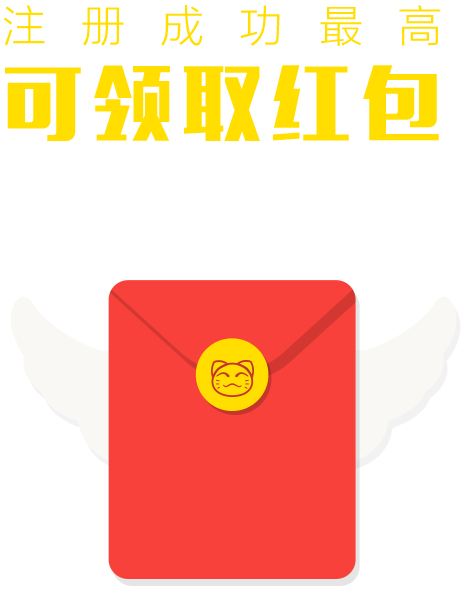
<style>
.page{position:relative;width:468px;height:590px;background:#ffffff}
.page>*{position:absolute;margin:0}
.t1{font:44px/90px "FZLTKHK--GBK1-0";letter-spacing:0.8em;color:#ffde00}
.t2{font:80px/90px "MFLiHei_Noncommercial-Regular";letter-spacing:0.12em;color:#ffde00}
</style>
<div class="page">
<p class="t1" style="left:3px;top:5px;width:438px;height:136px;text-align:center">注册成功最高<br><span class="t2">可领取红包</span></p>
</div>
